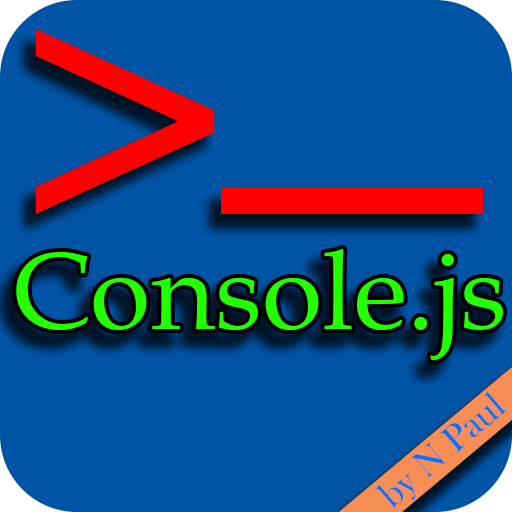
<style>
.page{position:relative;width:512px;height:512px;background:#0054a6}
.page>*{position:absolute;margin:0}
.t1{font:363.4px "BookAntiqua";color:#fe0000}
.t2{font:110.4px "BookAntiqua";color:#24ff00}
.t3{font:38.5px "BaskOldFace";color:#0374ff}
</style>
<div class="page">
<p class="t1" style="left:35px;top:29px;width:180px;height:185px">&gt;</p>
<p class="t2" style="left:16px;top:249px;width:487px;height:112px">Console.js</p>
<p class="t3" style="left:375px;top:392px;width:132px;height:116px;rotate:-41deg">by N Paul</p>
</div>
